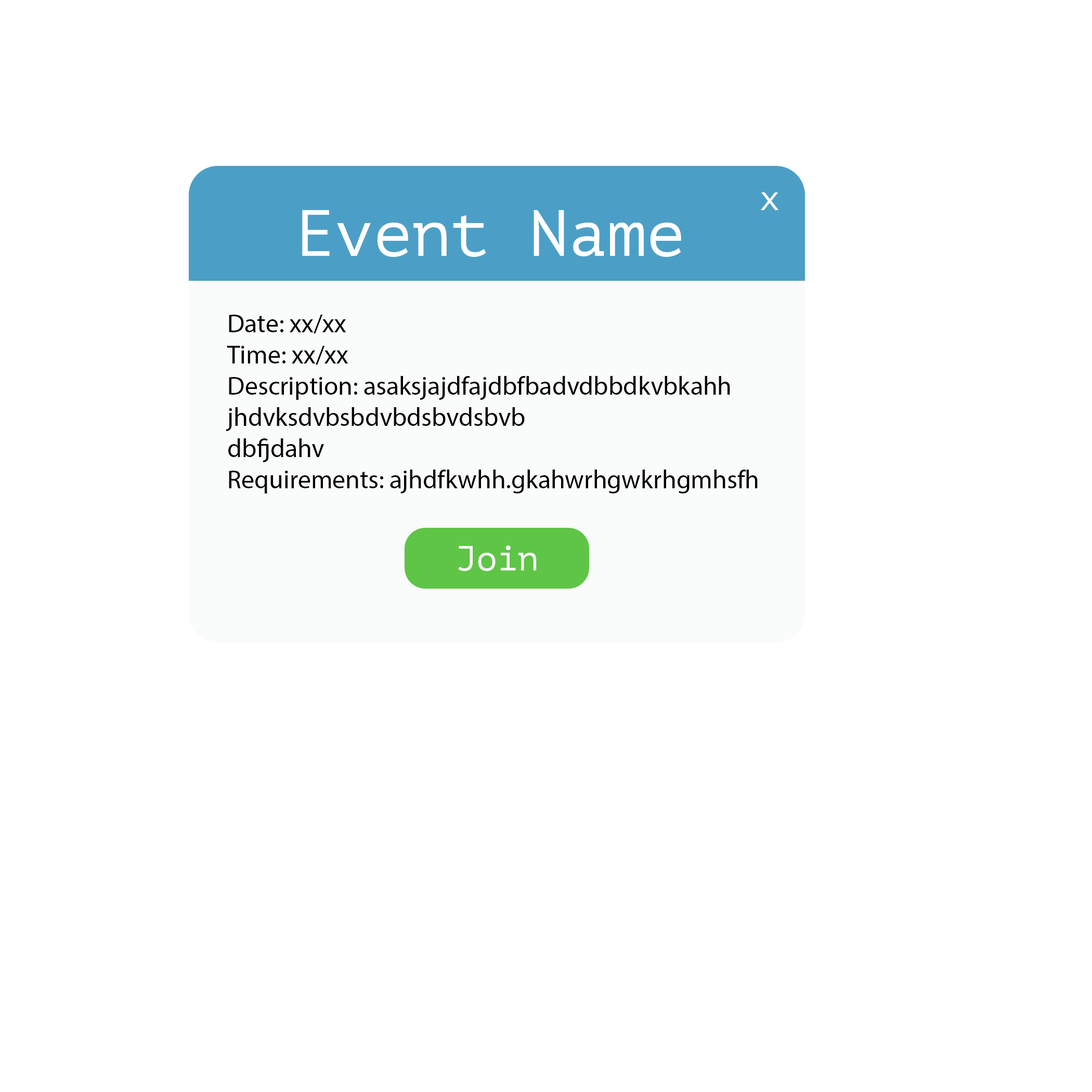
<style>
.page{position:relative;width:1092px;height:1092px;background:#ffffff}
.page>*{position:absolute;margin:0}
.t1{font:34.7px "PTMono-Regular";color:#ffffff}
.t2{font:65px "PTMono-Regular";color:#ffffff}
.t3{font:26px "MyriadPro-Regular";color:#000000}
</style>
<div class="page">
<p class="t1" style="left:761px;top:192px;width:18px;height:18px">x</p>
<p class="t2" style="left:302px;top:210px;width:379px;height:47px">Event Name</p>
<p class="t3" style="left:226px;top:315px;width:532px;height:178px">Date: xx/xx<br>Time: xx/xx<br>Description: asaksjajdfajdbfbadvdbbdkvbkahh<br>jhdvksdvbsbdvbdsbvdsbvb<br>dbfjdahv<br>Requirements: ajhdfkwhh.gkahwrhgwkrhgmhsfh</p>
<p class="t1" style="left:458px;top:545px;width:79px;height:26px">Join</p>
</div>
